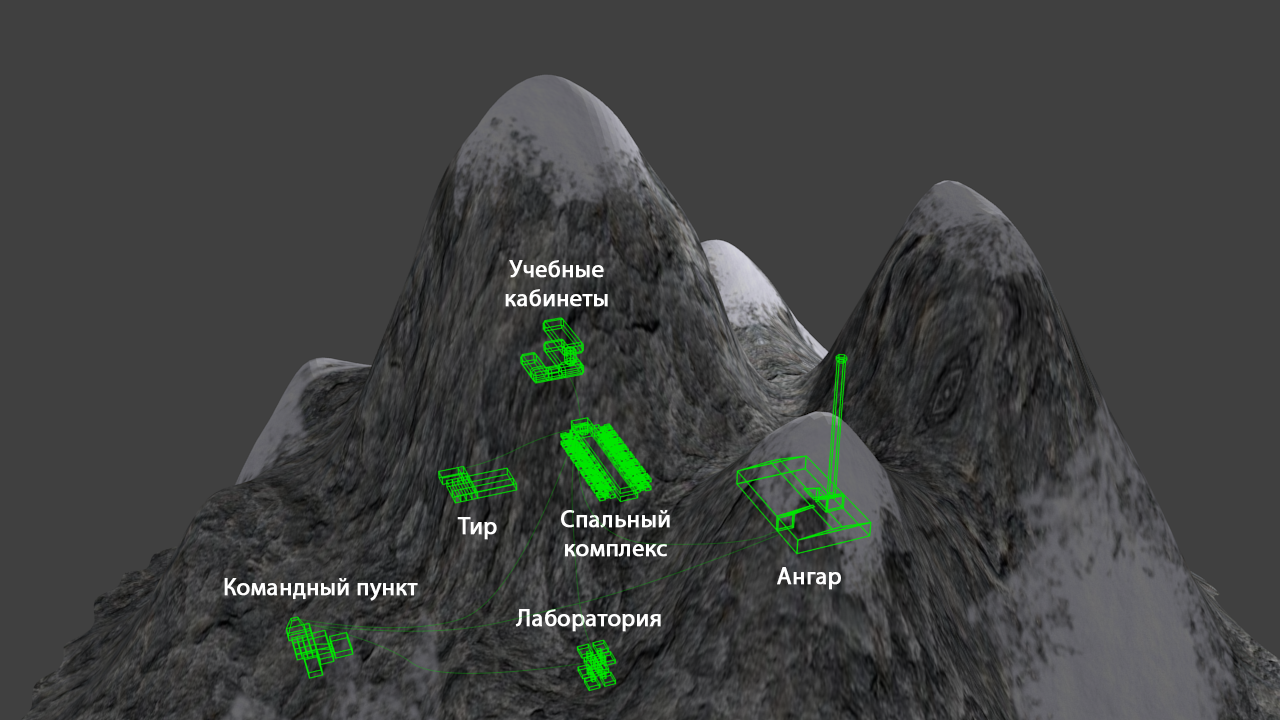
<style>
.page{position:relative;width:1280px;height:720px;background:#404040}
.page>*{position:absolute;margin:0}
.t1{font:24px "MyriadPro-Regular";color:#ffffff;font-weight:bold}
</style>
<div class="page">
<p class="t1" style="left:505px;top:260px;width:103px;height:47px;text-align:center">Учебные<br>кабинеты</p>
<p class="t1" style="left:561px;top:510px;width:109px;height:47px;text-align:center">Спальный<br>комплекс</p>
<p class="t1" style="left:457px;top:517px;width:40px;height:23px">Тир</p>
<p class="t1" style="left:777px;top:567px;width:64px;height:23px">Ангар</p>
<p class="t1" style="left:224px;top:578px;width:194px;height:23px">Командный пункт</p>
<p class="t1" style="left:515px;top:609px;width:146px;height:23px">Лаборатория</p>
</div>
